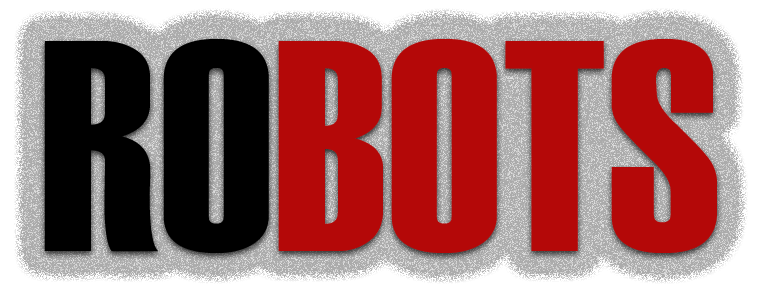
<style>
.page{position:relative;width:762px;height:292px;background:#b40808}
.page>*{position:absolute;margin:0}
.t1{font:300px "Haettenschweiler";color:#b40808}
.t2{font:300px "Haettenschweiler";color:#000000}
</style>
<div class="page">
<p class="t1" style="left:44px;top:39px;width:673px;height:214px"><span class="t2">RO</span>BOTS</p>
</div>
